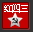
<style>
.page{position:relative;width:33px;height:32px;background:#c50000}
.page>*{position:absolute;margin:0}
.t1{font:10.4px "SimSun";letter-spacing:-0.25em;color:#ffffff}
</style>
<div class="page">
<p class="t1" style="left:4px;top:4px;width:24px;height:9px">红四三</p>
</div>
